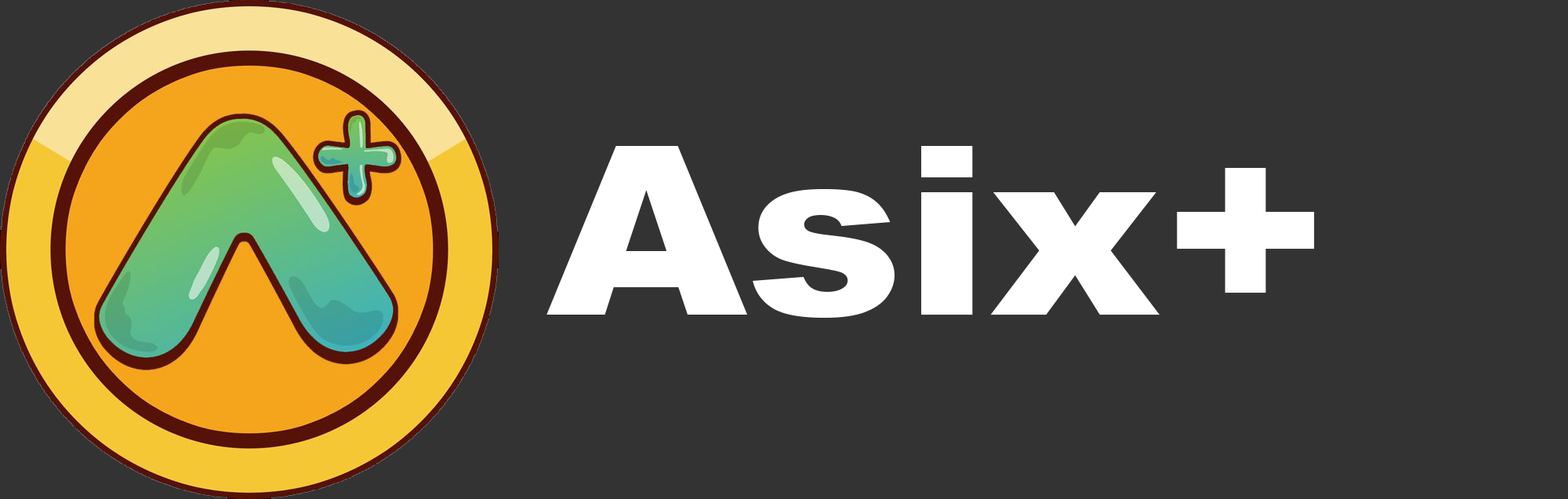
<style>
.page{position:relative;width:1568px;height:499px;background:#333333}
.page>*{position:absolute;margin:0}
.t1{font:235.2px "Arial-Black";color:#ffffff;scale:1.09 1}
</style>
<div class="page">
<p class="t1" style="left:546px;top:146px;width:769px;height:172px">Asix+</p>
</div>
